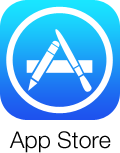
<style>
.page{position:relative;width:120px;height:153px;background:#ffffff}
.page>*{position:absolute;margin:0}
.t1{font:23px "HelveticaNeue-Light";color:#000000}
</style>
<div class="page">
<p class="t1" style="left:9px;top:131px;width:102px;height:22px">App Store</p>
</div>
